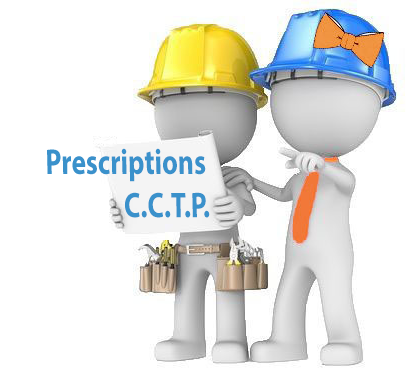
<style>
.page{position:relative;width:406px;height:374px;background:#ffffff}
.page>*{position:absolute;margin:0}
.t1{font:36px "MyriadPro-Bold";color:#3a91cb;scale:0.76 1}
</style>
<div class="page">
<p class="t1" style="left:47px;top:148px;width:163px;height:70px">Prescriptions<br>                   C.C.T.P.</p>
</div>
